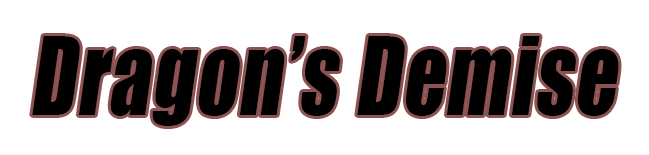
<style>
.page{position:relative;width:649px;height:155px;background:#ffffff}
.page>*{position:absolute;margin:0}
.t1{font:100px "Impact";letter-spacing:0.025em;color:#000000;font-style:italic;scale:0.81 1}
</style>
<div class="page">
<p class="t1" style="left:32px;top:36px;width:587px;height:90px">Dragon’s Demise</p>
</div>
